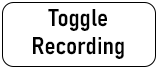
<style>
.page{position:relative;width:158px;height:69px;background:#ffffff}
.page>*{position:absolute;margin:0}
.t1{font:24px "Bahnschrift-SemiBoldSemiCondensed";color:#000000}
</style>
<div class="page">
<p class="t1" style="left:33px;top:9px;width:91px;height:50px;text-align:center">Toggle<br>Recording</p>
</div>
